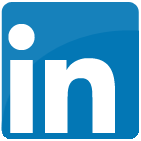
<style>
.page{position:relative;width:141px;height:141px;background:#0377b5}
.page>*{position:absolute;margin:0}
.t1{font:150px "Avenir-Black";letter-spacing:-0.021em;color:#ffffff}
</style>
<div class="page">
<p class="t1" style="left:8px;top:24px;width:107px;height:109px">in</p>
</div>
